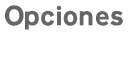
<style>
.page{position:relative;width:130px;height:70px;background:#ffffff}
.page>*{position:absolute;margin:0}
.t1{font:26px "Transport-Heavy-Regular";color:#666666}
</style>
<div class="page">
<p class="t1" style="left:5px;top:5px;width:118px;height:25px">Opciones</p>
</div>
